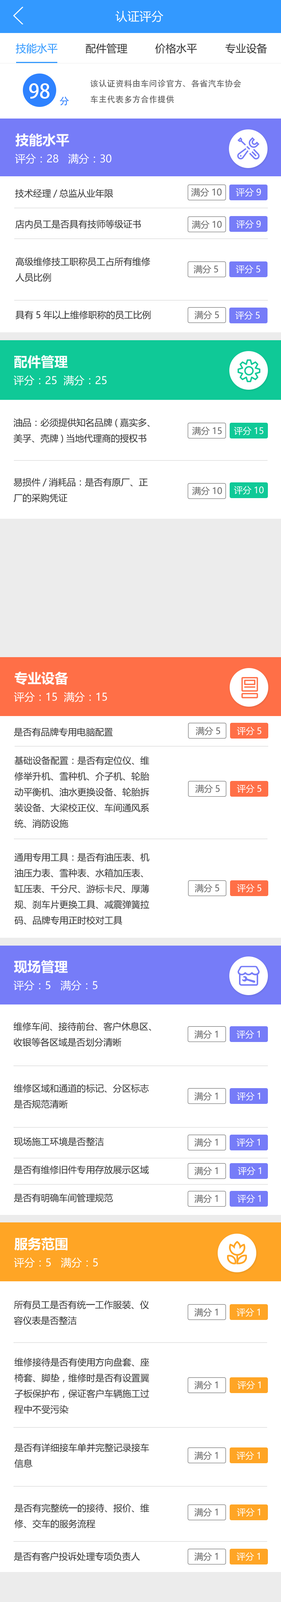
<style>
.page{position:relative;width:281px;height:1602px;background:#ffffff}
.page>*{position:absolute;margin:0}
.t1{font:12px "MicrosoftYaHei";color:#ffffff}
.t2{font:10.5px "MicrosoftYaHei";color:#3399ff}
.t3{font:10.5px "MicrosoftYaHei";color:#333333}
.t4{font:19.5px "AdobeHeitiStd-Regular";color:#ffffff}
.t5{font:8.2px/15.8px "AdobeHeitiStd-Regular";letter-spacing:0.02em;color:#666666}
.t6{font:9.7px "AdobeHeitiStd-Regular";color:#2e82ff}
.t7{font:13.5px "MicrosoftYaHei-Bold";color:#ffffff}
.t8{font:10.5px "MicrosoftYaHei";color:#ffffff}
.t9{font:9px "MicrosoftYaHei";color:#333333}
.t10{font:9px "MicrosoftYaHei";color:#666666}
.t11{font:9px "MicrosoftYaHei";color:#ffffff}
.t12{font:8.8px "MicrosoftYaHei";color:#666666}
.t13{font:8.8px "MicrosoftYaHei";color:#ffffff}
</style>
<div class="page">
<p class="t1" style="left:115px;top:10px;width:48px;height:12px">认证评分</p>
<p class="t2" style="left:16px;top:43px;width:42px;height:11px">技能水平</p>
<p class="t3" style="left:85px;top:43px;width:42px;height:11px">配件管理</p>
<p class="t3" style="left:155px;top:43px;width:42px;height:11px">价格水平</p>
<p class="t3" style="left:225px;top:43px;width:42px;height:11px">专业设备</p>
<p class="t4" style="left:29px;top:83px;width:20px;height:16px">98</p>
<p class="t5" style="left:90px;top:79px;width:151px;height:24px">该认证资料由车问诊官方、各省汽车协会<br>车主代表多方合作提供</p>
<p class="t6" style="left:60px;top:96px;width:9px;height:9px">分</p>
<p class="t7" style="left:15px;top:133px;width:54px;height:14px">技能水平</p>
<p class="t8" style="left:15px;top:153px;width:97px;height:11px">评分：28   满分：30</p>
<p class="t9" style="left:15px;top:189px;width:98px;height:9px">技术经理/总监从业年限</p>
<p class="t10" style="left:191px;top:188px;width:31px;height:9px">满分10</p>
<p class="t11" style="left:236px;top:188px;width:25px;height:9px">评分9</p>
<p class="t9" style="left:15px;top:219px;width:126px;height:10px">店内员工是否具有技师等级证书</p>
<p class="t12" style="left:192px;top:220px;width:30px;height:9px">满分10</p>
<p class="t13" style="left:236px;top:220px;width:25px;height:9px">评分9</p>
<p class="t9" style="left:15px;top:257px;width:135px;height:25px">高级维修技工职称员工占所有维修<br>人员比例</p>
<p class="t12" style="left:194px;top:265px;width:24px;height:9px">满分5</p>
<p class="t13" style="left:236px;top:265px;width:25px;height:9px">评分5</p>
<p class="t9" style="left:15px;top:310px;width:136px;height:9px">具有5年以上维修职称的员工比例</p>
<p class="t12" style="left:195px;top:310px;width:24px;height:9px">满分5</p>
<p class="t13" style="left:235px;top:311px;width:25px;height:9px">评分5</p>
<p class="t7" style="left:14px;top:355px;width:54px;height:13px">配件管理</p>
<p class="t8" style="left:13px;top:375px;width:94px;height:10px">评分：25  满分：25</p>
<p class="t9" style="left:13px;top:418px;width:137px;height:25px">油品：必须提供知名品牌(嘉实多、<br>美孚、壳牌)当地代理商的授权书</p>
<p class="t12" style="left:192px;top:426px;width:30px;height:9px">满分15</p>
<p class="t13" style="left:234px;top:426px;width:30px;height:9px">评分15</p>
<p class="t9" style="left:13px;top:478px;width:135px;height:24px">易损件/消耗品：是否有原厂、正<br>厂的采购凭证</p>
<p class="t13" style="left:234px;top:486px;width:30px;height:9px">评分10</p>
<p class="t12" style="left:192px;top:486px;width:30px;height:9px">满分10</p>
<p class="t7" style="left:15px;top:672px;width:53px;height:13px">专业设备</p>
<p class="t8" style="left:14px;top:691px;width:93px;height:11px">评分：15  满分：15</p>
<p class="t9" style="left:14px;top:727px;width:99px;height:9px">是否有品牌专用电脑配置</p>
<p class="t12" style="left:196px;top:726px;width:24px;height:9px">满分5</p>
<p class="t13" style="left:237px;top:726px;width:25px;height:9px">评分5</p>
<p class="t9" style="left:14px;top:756px;width:135px;height:72px">基础设备配置：是否有定位仪、维<br>修举升机、雪种机、介子机、轮胎<br>动平衡机、油水更换设备、轮胎拆<br>装设备、大梁校正仪、车间通风系<br>统、消防设施</p>
<p class="t12" style="left:195px;top:784px;width:25px;height:9px">满分5</p>
<p class="t13" style="left:237px;top:784px;width:25px;height:9px">评分5</p>
<p class="t9" style="left:14px;top:853px;width:136px;height:72px">通用专用工具：是否有油压表、机<br>油压力表、雪种表、水箱加压表、<br>缸压表、千分尺、游标卡尺、厚薄<br>规、刹车片更换工具、减震弹簧拉<br>码、品牌专用正时校对工具</p>
<p class="t12" style="left:195px;top:883px;width:24px;height:9px">满分5</p>
<p class="t13" style="left:237px;top:883px;width:25px;height:9px">评分5</p>
<p class="t7" style="left:14px;top:960px;width:54px;height:13px">现场管理</p>
<p class="t8" style="left:13px;top:980px;width:84px;height:10px">评分：5   满分：5</p>
<p class="t9" style="left:13px;top:1021px;width:138px;height:26px">维修车间、接待前台、客户休息区、<br>收银等各区域是否划分清晰</p>
<p class="t12" style="left:195px;top:1030px;width:23px;height:9px">满分1</p>
<p class="t13" style="left:237px;top:1030px;width:23px;height:9px">评分1</p>
<p class="t9" style="left:14px;top:1084px;width:135px;height:24px">维修区域和通道的标记、分区标志<br>是否规范清晰</p>
<p class="t12" style="left:195px;top:1092px;width:23px;height:9px">满分1</p>
<p class="t13" style="left:237px;top:1092px;width:23px;height:9px">评分1</p>
<p class="t9" style="left:14px;top:1137px;width:90px;height:9px">现场施工环境是否整洁</p>
<p class="t12" style="left:195px;top:1138px;width:23px;height:9px">满分1</p>
<p class="t13" style="left:237px;top:1138px;width:23px;height:9px">评分1</p>
<p class="t9" style="left:14px;top:1165px;width:135px;height:9px">是否有维修旧件专用存放展示区域</p>
<p class="t12" style="left:195px;top:1166px;width:23px;height:9px">满分1</p>
<p class="t13" style="left:238px;top:1166px;width:23px;height:9px">评分1</p>
<p class="t9" style="left:14px;top:1193px;width:99px;height:9px">是否有明确车间管理规范</p>
<p class="t12" style="left:195px;top:1194px;width:23px;height:9px">满分1</p>
<p class="t13" style="left:238px;top:1194px;width:23px;height:9px">评分1</p>
<p class="t7" style="left:14px;top:1237px;width:53px;height:13px">服务范围</p>
<p class="t8" style="left:14px;top:1257px;width:84px;height:10px">评分：5   满分：5</p>
<p class="t9" style="left:14px;top:1300px;width:135px;height:25px">所有员工是否有统一工作服装、仪<br>容仪表是否整洁</p>
<p class="t12" style="left:195px;top:1308px;width:23px;height:9px">满分1</p>
<p class="t13" style="left:237px;top:1308px;width:23px;height:9px">评分1</p>
<p class="t9" style="left:14px;top:1357px;width:135px;height:57px">维修接待是否有使用方向盘套、座<br>椅套、脚垫，维修时是否有设置翼<br>子板保护布，保证客户车辆施工过<br>程中不受污染</p>
<p class="t12" style="left:195px;top:1380px;width:23px;height:9px">满分1</p>
<p class="t13" style="left:238px;top:1380px;width:23px;height:9px">评分1</p>
<p class="t9" style="left:14px;top:1443px;width:135px;height:25px">是否有详细接车单并完整记录接车<br>信息</p>
<p class="t12" style="left:195px;top:1451px;width:23px;height:9px">满分1</p>
<p class="t13" style="left:237px;top:1451px;width:23px;height:9px">评分1</p>
<p class="t9" style="left:14px;top:1503px;width:135px;height:25px">是否有完整统一的接待、报价、维<br>修、交车的服务流程</p>
<p class="t12" style="left:195px;top:1507px;width:23px;height:9px">满分1</p>
<p class="t13" style="left:237px;top:1507px;width:23px;height:9px">评分1</p>
<p class="t9" style="left:14px;top:1551px;width:126px;height:10px">是否有客户投诉处理专项负责人</p>
<p class="t12" style="left:195px;top:1552px;width:23px;height:9px">满分1</p>
<p class="t13" style="left:237px;top:1552px;width:23px;height:9px">评分1</p>
</div>
